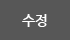
<style>
.page{position:relative;width:70px;height:40px;background:#575757}
.page>*{position:absolute;margin:0}
.t1{font:14px "NanumGothicBold";letter-spacing:-0.025em;color:#ffffff}
</style>
<div class="page">
<p class="t1" style="left:22px;top:14px;width:25px;height:13px">수정</p>
</div>
